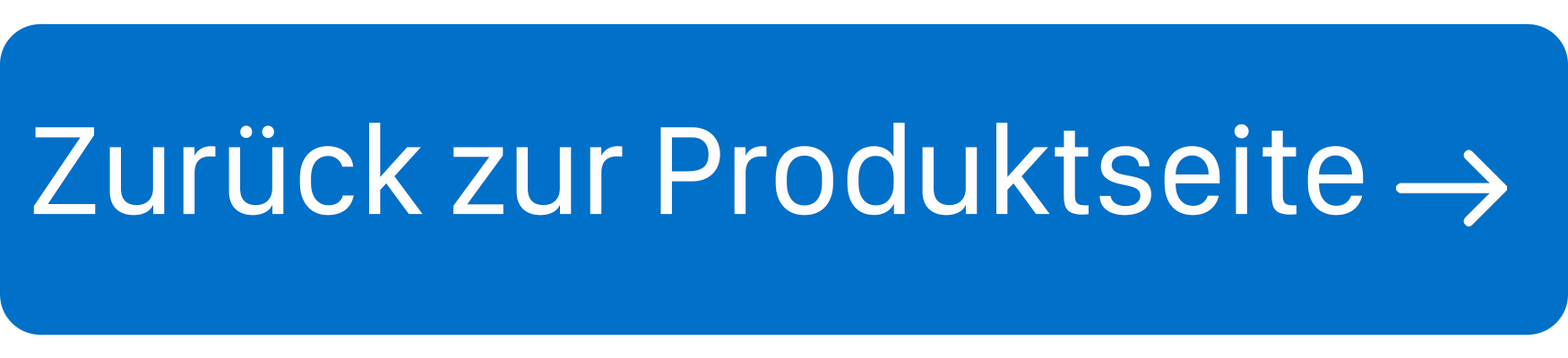
<style>
.page{position:relative;width:1568px;height:358px;background:#0070c9}
.page>*{position:absolute;margin:0}
.t1{font:129.9px "SFCompactDisplay-Regular";color:#fdfdfd}
</style>
<div class="page">
<p class="t1" style="left:33px;top:123px;width:1331px;height:93px">Zurück zur Produktseite</p>
</div>
